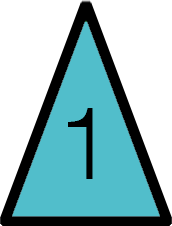
<style>
.page{position:relative;width:172px;height:226px;background:#ffffff}
.page>*{position:absolute;margin:0}
.t1{font:100px "Helvetica-Light";color:#000000}
</style>
<div class="page">
<p class="t1" style="left:68px;top:108px;width:25px;height:71px">1</p>
</div>
